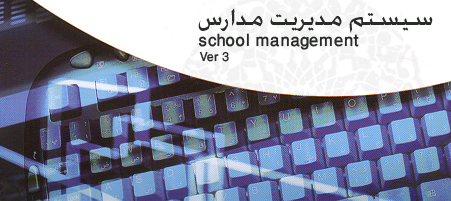
<style>
.page{position:relative;width:451px;height:201px}
.page>*{position:absolute;margin:0}
.t1{font:30.9px "WinSoftPro-Medium";color:#282b28}
.t2{font:24px "WinSoftPro-Medium";color:#282b28}
.t3{font:17.6px "WinSoftPro-Medium";color:#282b28}
</style>
<div class="page">
<p class="t1" style="left:198px;top:8px;width:235px;height:25px">سيستم مديريت مدارس</p>
<p class="t2" style="left:198px;top:33px;width:161px;height:17px">school management</p>
<p class="t3" style="left:199px;top:51px;width:30px;height:11px">Ver 3</p>
</div>
